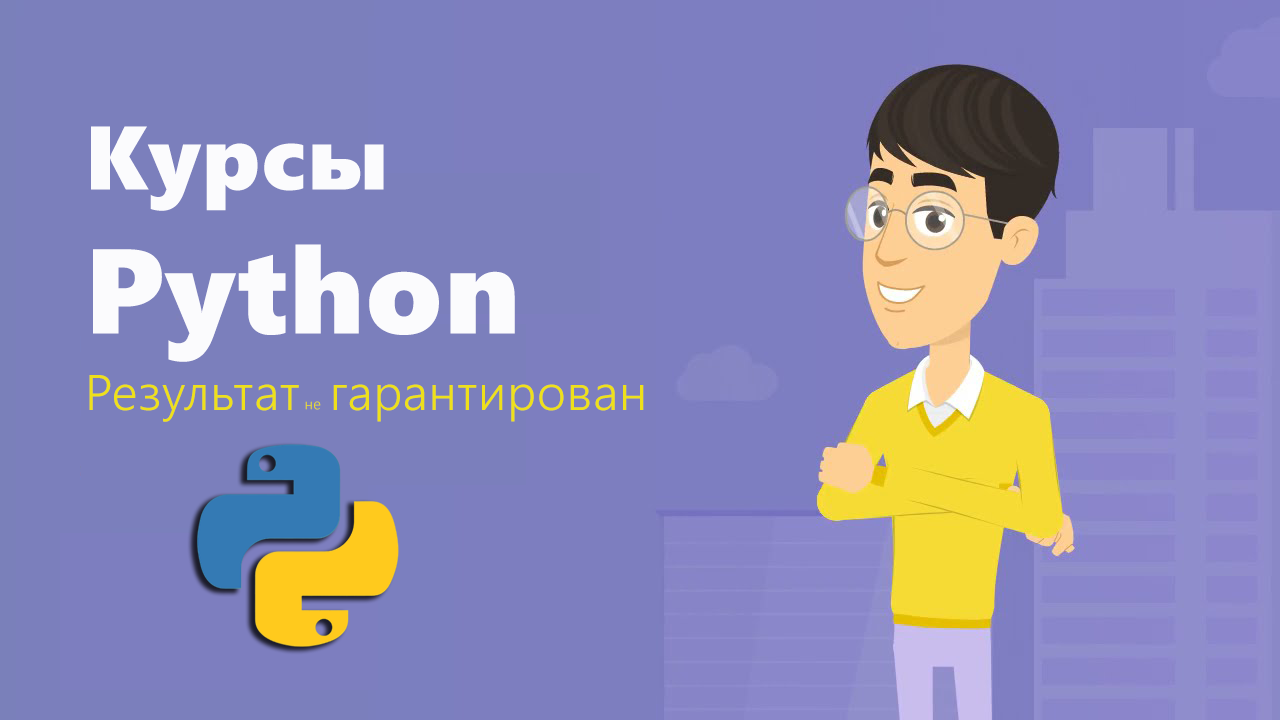
<style>
.page{position:relative;width:1280px;height:720px;background:#7b7fbc}
.page>*{position:absolute;margin:0}
.t1{font:120px "SegoeUIBlack";letter-spacing:0.02em;color:#fbfbfd}
.t2{font:90px "SegoeUIBlack";letter-spacing:0.02em;color:#fbfbfd}
.t3{font:50px "SegoeUI-Semilight";letter-spacing:0.02em;color:#eee01b}
.t4{font:15px "SegoeUI-Semilight";letter-spacing:0.02em;color:#eee01b}
</style>
<div class="page">
<p class="t1" style="left:91px;top:126px;width:424px;height:236px"><span class="t2">Курсы<br></span>Python</p>
<p class="t3" style="left:89px;top:375px;width:555px;height:47px">Результат  гарантирован</p>
<p class="t4" style="left:305px;top:401px;width:16px;height:9px">не</p>
</div>
